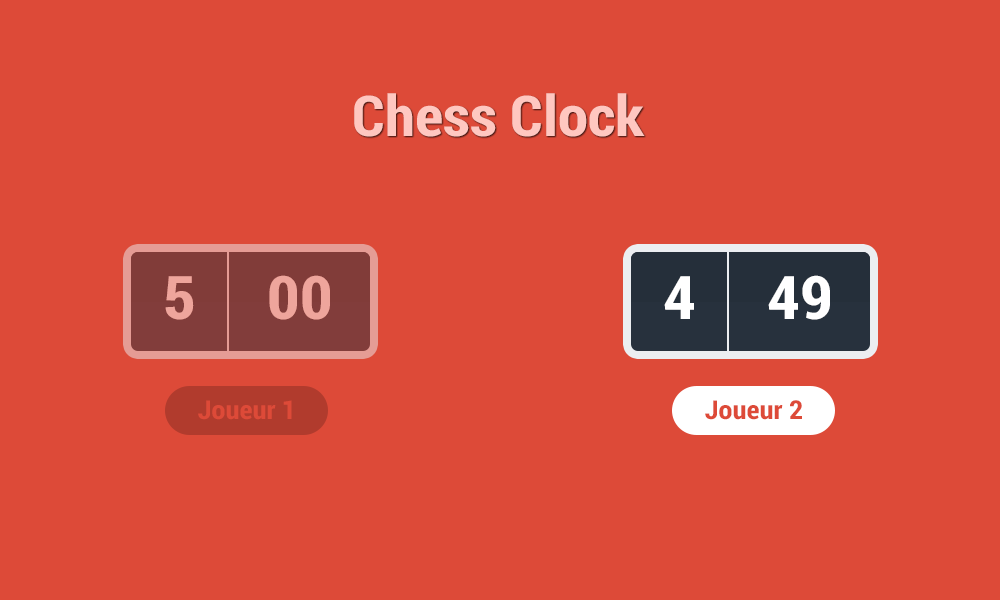
<style>
.page{position:relative;width:1000px;height:600px;background:#dd4a38}
.page>*{position:absolute;margin:0}
.t1{font:56px "RobotoCondensed-Bold";color:#ffc7c0;scale:1.1 1}
.t2{font:60px "RobotoCondensed-Bold";color:#eea59c;scale:1.1 1}
.t3{font:60px "RobotoCondensed-Bold";color:#ffffff;scale:1.1 1}
.t4{font:26px "RobotoCondensed-Bold";color:#dd4a38;scale:1.1 1}
</style>
<div class="page">
<p class="t1" style="left:354px;top:93px;width:291px;height:44px">Chess Clock</p>
<p class="t2" style="left:165px;top:276px;width:29px;height:44px">5</p>
<p class="t2" style="left:269px;top:275px;width:61px;height:45px">00</p>
<p class="t3" style="left:664px;top:276px;width:30px;height:43px">4</p>
<p class="t3" style="left:768px;top:275px;width:62px;height:45px">49</p>
<p class="t4" style="left:198px;top:400px;width:94px;height:20px">Joueur 1</p>
<p class="t4" style="left:705px;top:400px;width:97px;height:20px">Joueur 2</p>
</div>
